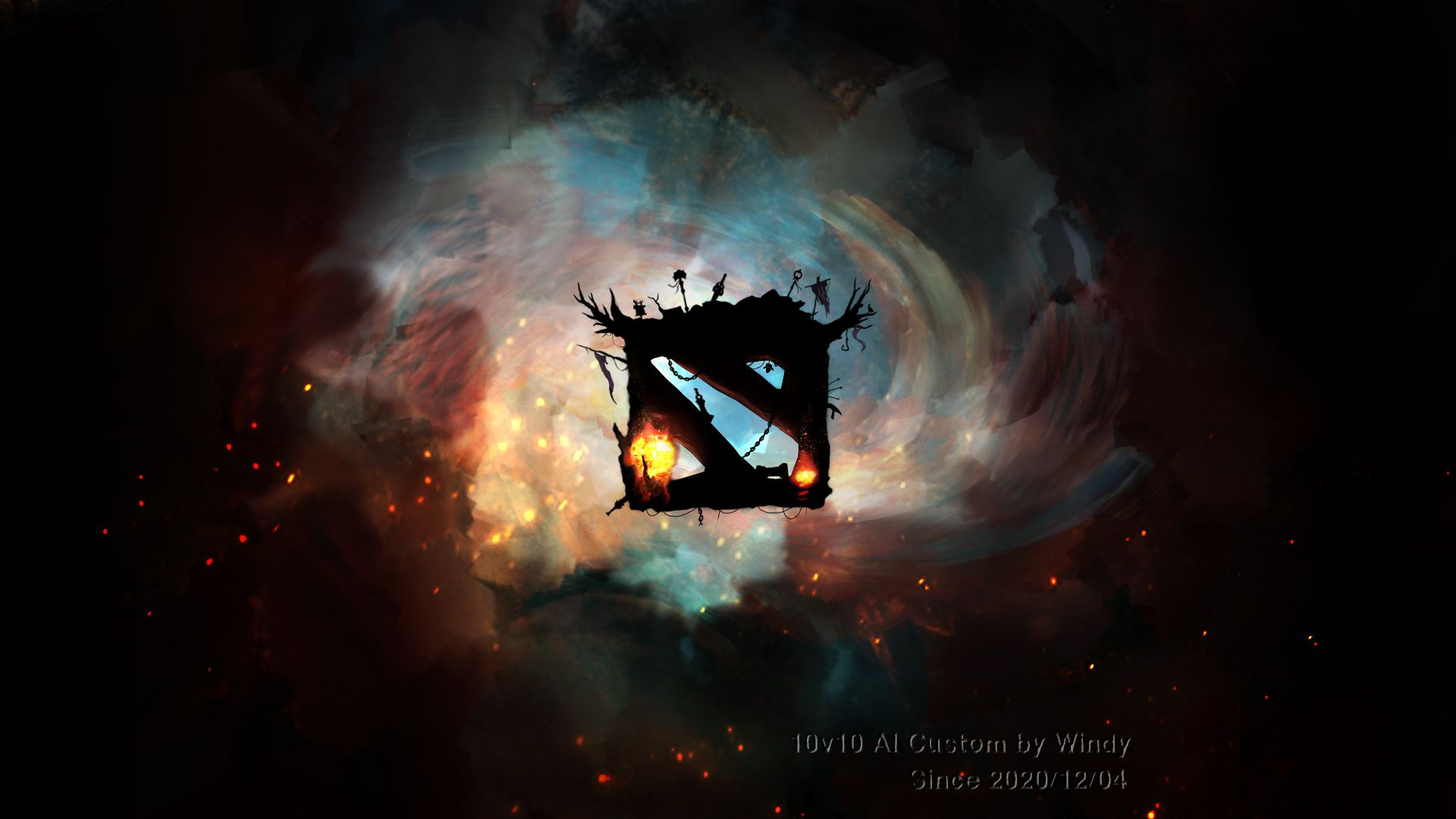
<style>
.page{position:relative;width:1456px;height:819px}
.page>*{position:absolute;margin:0}
.t1{font:27.3px "WCROUGHTRADBta"}
</style>
<div class="page">
<p class="t1" style="left:789px;top:731px;width:343px;height:28px">10v10 AI Custom by Windy</p>
<p class="t1" style="left:907px;top:767px;width:221px;height:23px">Since 2020/12/04</p>
</div>
